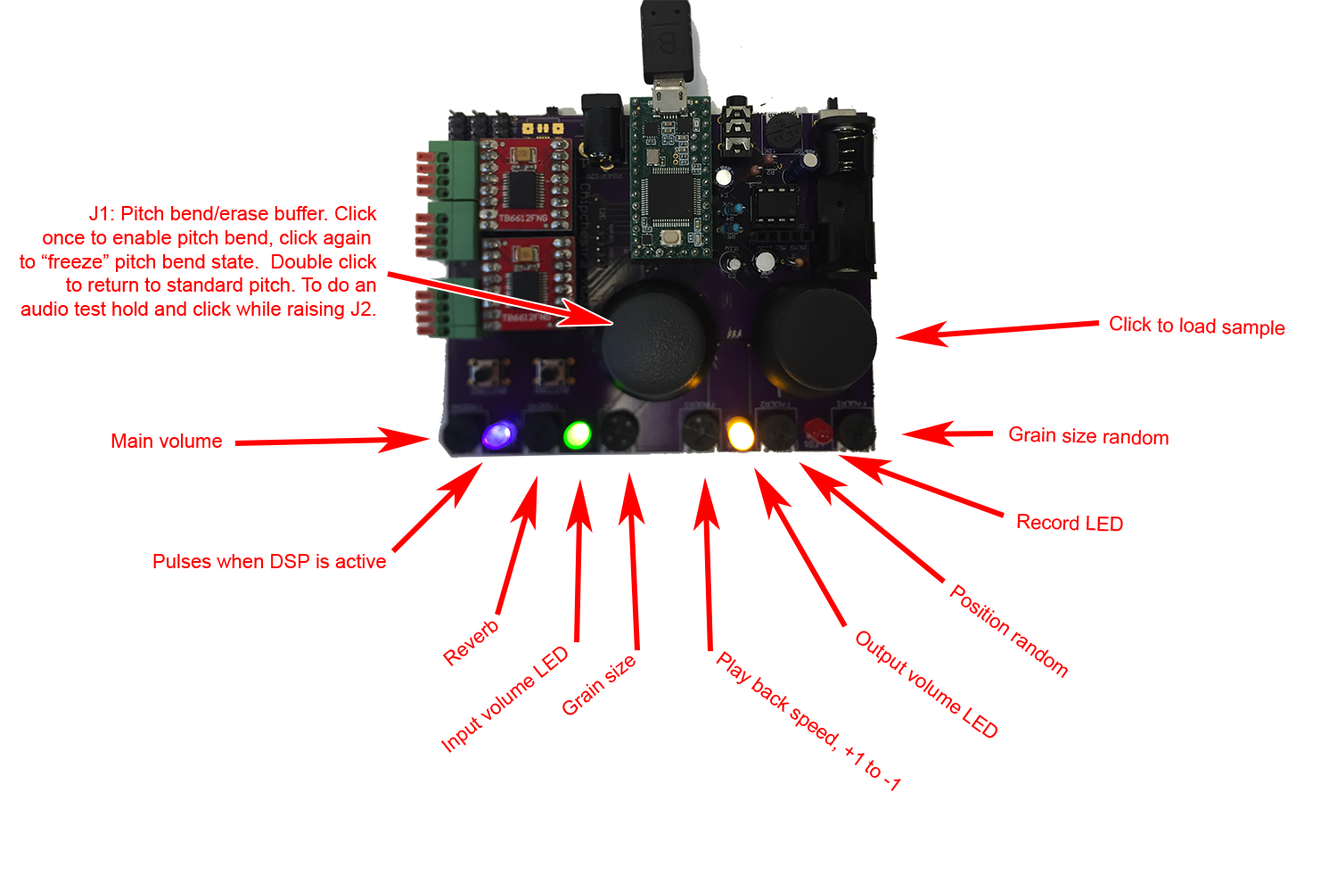
<style>
.page{position:relative;width:1337px;height:892px;background:#ffffff}
.page>*{position:absolute;margin:0}
.t1{font:19.7px "ArialMT";color:#ff0000}
</style>
<div class="page">
<p class="t1" style="left:20px;top:206px;width:357px;height:113px;text-align:right">J1: Pitch bend/erase buffer. Click<br>once to enable pitch bend, click again <br>to “freeze” pitch bend state.  Double click<br>to return to standard pitch. To do an<br>audio test hold and click while raising J2.</p>
<p class="t1" style="left:1110px;top:315px;width:176px;height:24px;rotate:2deg">Click to load sample</p>
<p class="t1" style="left:1009px;top:425px;width:160px;height:20px;rotate:2deg">Grain size random</p>
<p class="t1" style="left:111px;top:433px;width:111px;height:15px">Main volume</p>
<p class="t1" style="left:1017px;top:514px;width:106px;height:17px;rotate:2deg">Record LED</p>
<p class="t1" style="left:153px;top:554px;width:233px;height:14px">Pulses when DSP is active</p>
<p class="t1" style="left:950px;top:584px;width:118px;height:94px;rotate:36deg">Position random</p>
<p class="t1" style="left:442px;top:621px;width:56px;height:45px;rotate:-39deg">Reverb</p>
<p class="t1" style="left:856px;top:630px;width:143px;height:108px;rotate:36deg">Output volume LED</p>
<p class="t1" style="left:441px;top:646px;width:127px;height:107px;rotate:-39deg">Input volume LED</p>
<p class="t1" style="left:716px;top:651px;width:185px;height:140px;rotate:36deg">Play back speed, +1 to -1</p>
<p class="t1" style="left:563px;top:655px;width:73px;height:60px;rotate:-39deg">Grain size</p>
</div>
